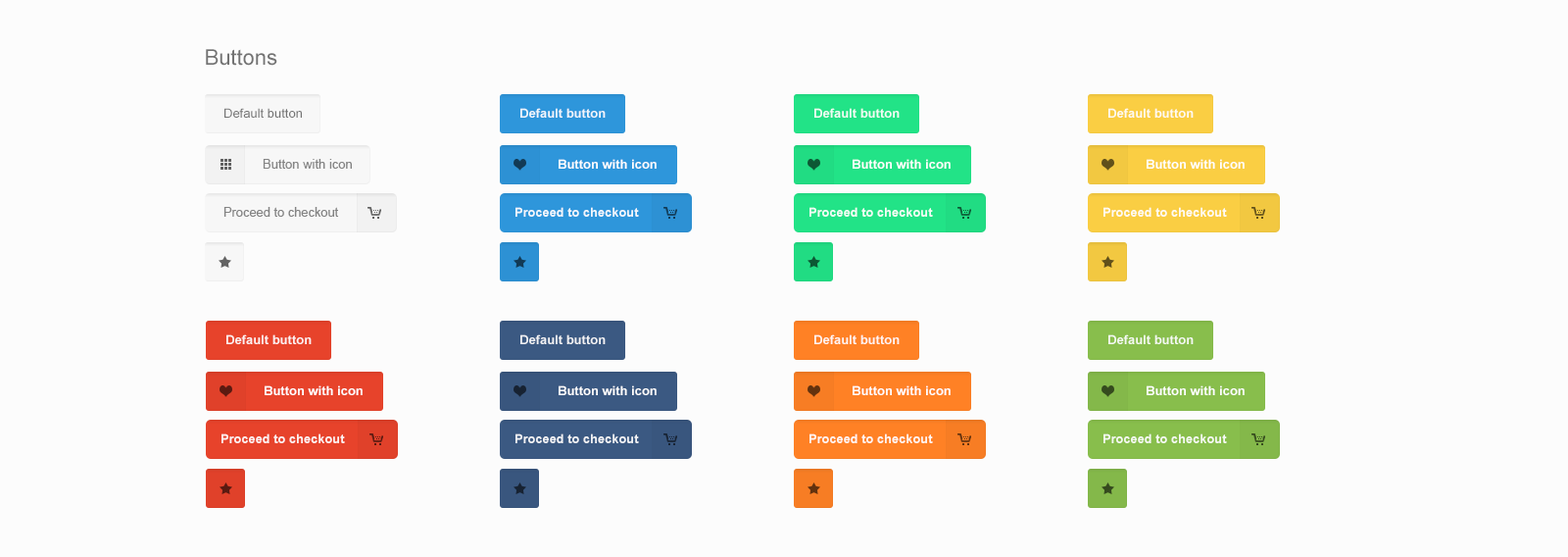
<style>
.page{position:relative;width:1568px;height:557px;background:#fcfcfc}
.page>*{position:absolute;margin:0}
.t1{font:21.6px "ArialMT";color:#737373}
.t2{font:12.7px "ArialMT";color:#747474}
.t3{font:12.7px "Arial-BoldMT";color:#ffffff}
</style>
<div class="page">
<p class="t1" style="left:206px;top:49px;width:71px;height:17px">Buttons</p>
<p class="t2" style="left:224px;top:108px;width:78px;height:10px">Default button</p>
<p class="t3" style="left:520px;top:108px;width:86px;height:10px;opacity:0.9">Default button</p>
<p class="t3" style="left:814px;top:108px;width:86px;height:10px;opacity:0.9">Default button</p>
<p class="t3" style="left:1108px;top:108px;width:86px;height:10px;opacity:0.9">Default button</p>
<p class="t2" style="left:263px;top:159px;width:89px;height:10px;opacity:0.9">Button with icon</p>
<p class="t3" style="left:559px;top:159px;width:98px;height:10px">Button with icon</p>
<p class="t3" style="left:853px;top:159px;width:98px;height:10px">Button with icon</p>
<p class="t3" style="left:1147px;top:159px;width:98px;height:10px">Button with icon</p>
<p class="t2" style="left:223px;top:207px;width:116px;height:10px;opacity:0.9">Proceed to checkout</p>
<p class="t3" style="left:515px;top:207px;width:124px;height:10px;opacity:0.9">Proceed to checkout</p>
<p class="t3" style="left:809px;top:207px;width:124px;height:10px;opacity:0.9">Proceed to checkout</p>
<p class="t3" style="left:1103px;top:207px;width:124px;height:10px;opacity:0.9">Proceed to checkout</p>
<p class="t3" style="left:226px;top:334px;width:86px;height:10px;opacity:0.9">Default button</p>
<p class="t3" style="left:520px;top:334px;width:86px;height:10px;opacity:0.9">Default button</p>
<p class="t3" style="left:814px;top:334px;width:86px;height:10px;opacity:0.9">Default button</p>
<p class="t3" style="left:1108px;top:334px;width:86px;height:10px;opacity:0.9">Default button</p>
<p class="t3" style="left:265px;top:385px;width:98px;height:10px">Button with icon</p>
<p class="t3" style="left:559px;top:385px;width:98px;height:10px">Button with icon</p>
<p class="t3" style="left:853px;top:385px;width:98px;height:10px">Button with icon</p>
<p class="t3" style="left:1147px;top:385px;width:98px;height:10px">Button with icon</p>
<p class="t3" style="left:221px;top:433px;width:124px;height:10px;opacity:0.9">Proceed to checkout</p>
<p class="t3" style="left:515px;top:433px;width:124px;height:10px;opacity:0.9">Proceed to checkout</p>
<p class="t3" style="left:809px;top:433px;width:124px;height:10px;opacity:0.9">Proceed to checkout</p>
<p class="t3" style="left:1103px;top:433px;width:124px;height:10px;opacity:0.9">Proceed to checkout</p>
</div>
